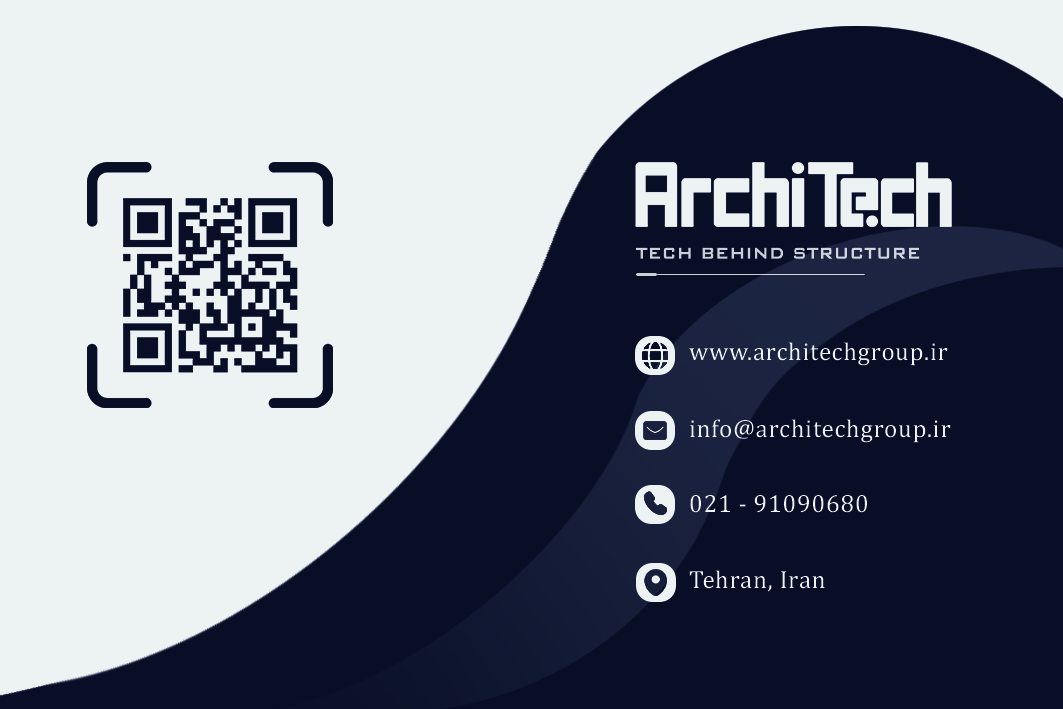
<style>
.page{position:relative;width:1063px;height:709px;background:#080e25}
.page>*{position:absolute;margin:0}
.t1{font:20.8px "BankGothicBold";color:#cad0d7;scale:0.89 1}
.t2{font:25px "CambriaMath";letter-spacing:0.025em;color:#edf2f2}
</style>
<div class="page">
<p class="t1" style="left:636px;top:247px;width:284px;height:12px">TECH BEHIND STRUCTURE</p>
<p class="t2" style="left:689px;top:342px;width:259px;height:24px">www.architechgroup.ir</p>
<p class="t2" style="left:690px;top:419px;width:261px;height:24px">info@architechgroup.ir</p>
<p class="t2" style="left:690px;top:495px;width:177px;height:18px">021 - 91090680</p>
<p class="t2" style="left:689px;top:570px;width:136px;height:22px">Tehran, Iran</p>
</div>
